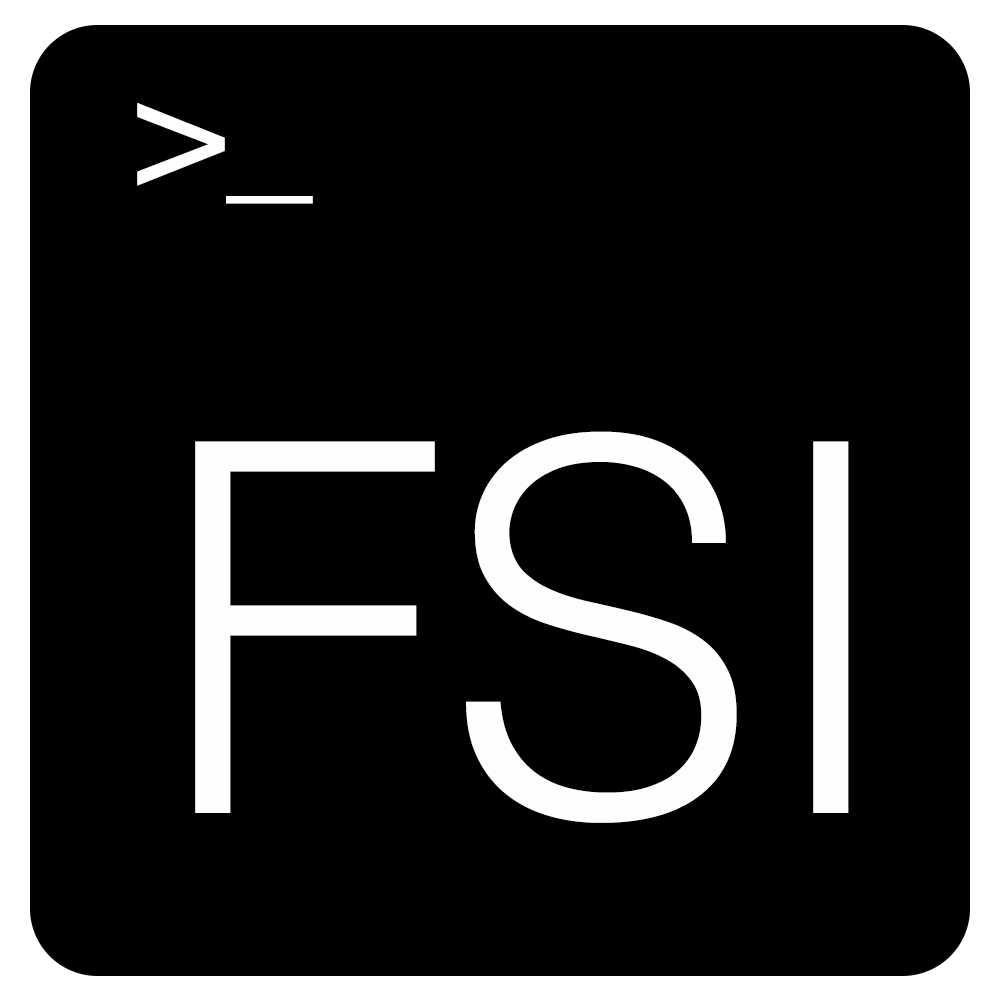
<style>
.page{position:relative;width:1000px;height:1000px;background:#000000}
.page>*{position:absolute;margin:0}
.t1{font:155.9px "Helvetica";color:#fefefe}
.t2{font:516.1px "Helvetica-Light";color:#fefefe}
</style>
<div class="page">
<p class="t1" style="left:137px;top:103px;width:176px;height:101px">&gt;_</p>
<p class="t2" style="left:195px;top:431px;width:654px;height:392px">FSI</p>
</div>
